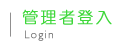
<style>
.page{position:relative;width:120px;height:50px;background:#ffffff}
.page>*{position:absolute;margin:0}
.t1{font:16px "DFYuan-Lt-HK-BF";letter-spacing:0.12em;color:#3ed73a;font-weight:bold}
.t2{font:11px "Humanist521BT-Light";letter-spacing:0.12em;color:#707070;font-weight:bold}
</style>
<div class="page">
<p class="t1" style="left:22px;top:9px;width:90px;height:16px">管理者登入</p>
<p class="t2" style="left:25px;top:30px;width:28px;height:11px">Login</p>
</div>
